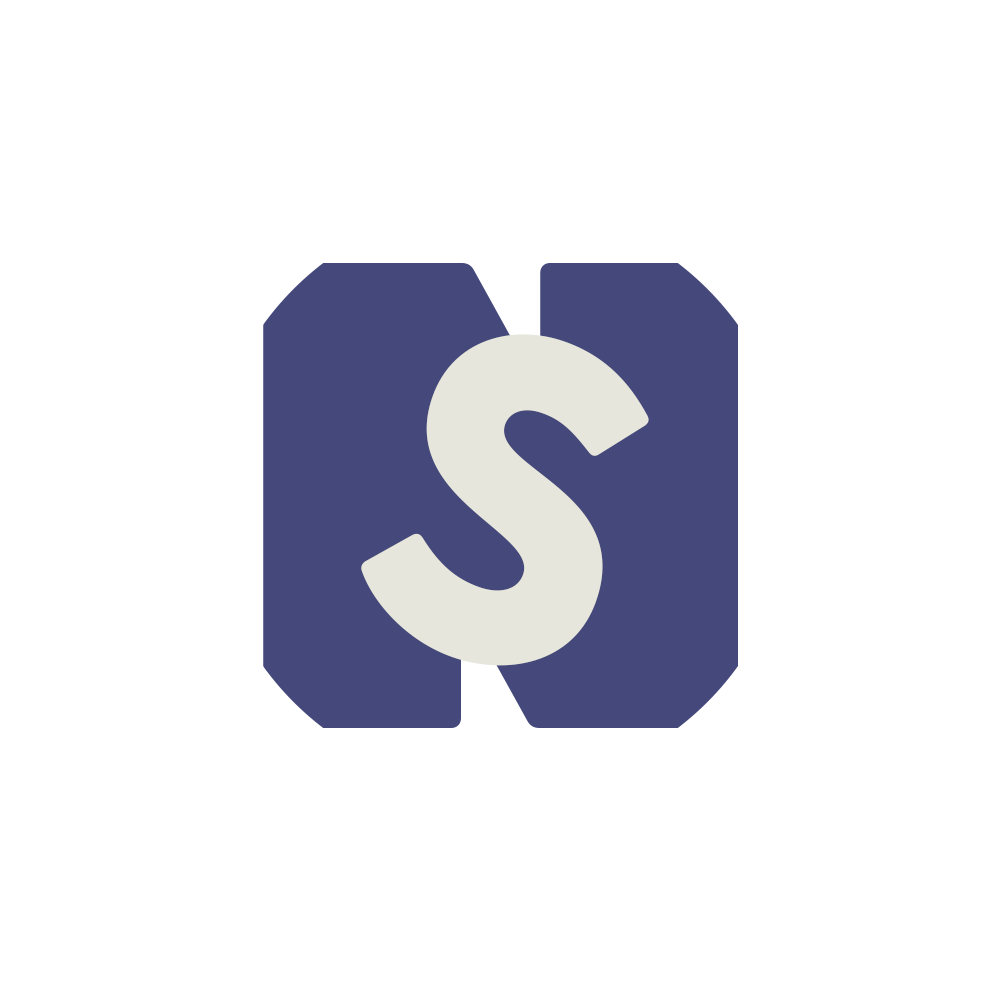
<style>
.page{position:relative;width:1000px;height:1000px;background:#ffffff}
.page>*{position:absolute;margin:0}
.t1{font:465.1px "GreycliffCF-Heavy";color:#e6e6dd}
</style>
<div class="page">
<p class="t1" style="left:361px;top:334px;width:288px;height:332px;rotate:19deg">S</p>
</div>
